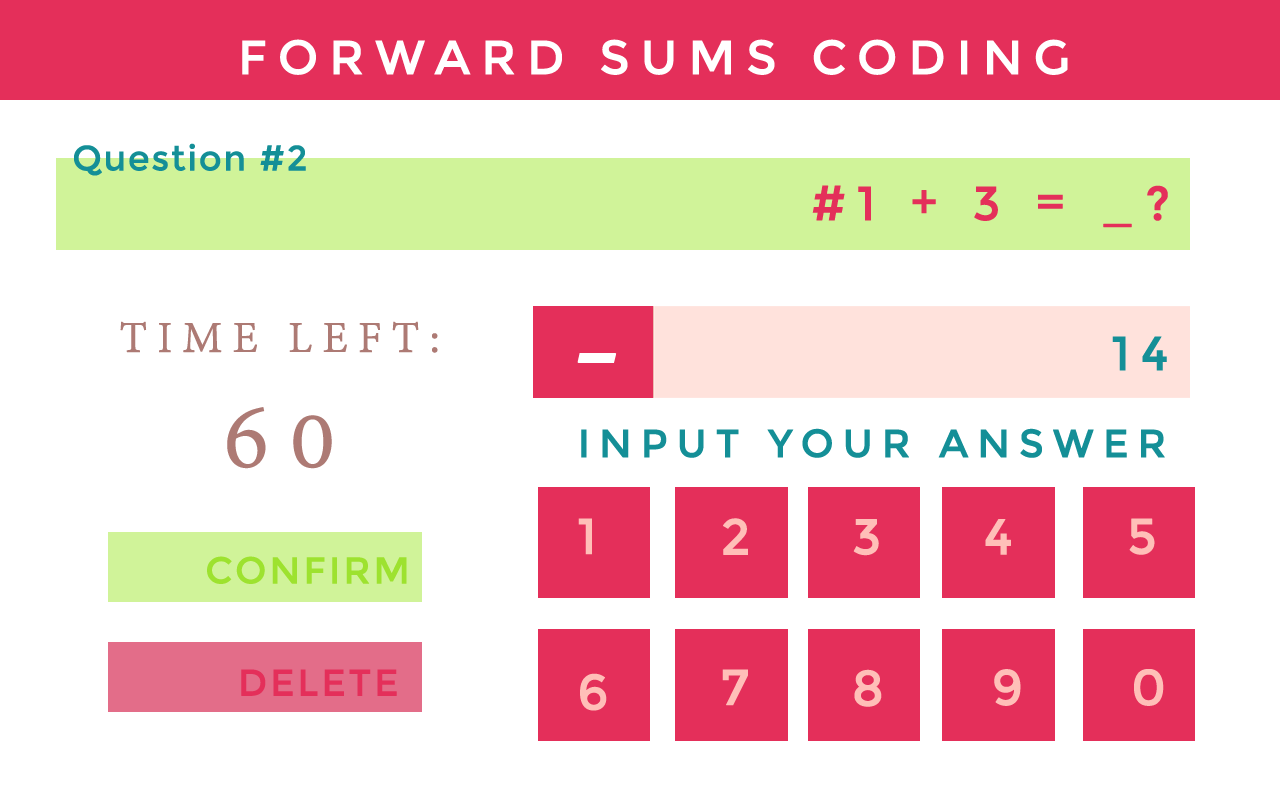
<style>
.page{position:relative;width:1280px;height:800px;background:#ffffff}
.page>*{position:absolute;margin:0}
.t1{font:48px "Montserrat-Regular";letter-spacing:0.2em;color:#ffffff;text-transform:uppercase;font-weight:bold}
.t2{font:35px "Montserrat-Regular";letter-spacing:0.025em;color:#148f97;font-weight:bold}
.t3{font:48px "Montserrat-Regular";letter-spacing:0.2em;color:#e42f5a;font-weight:bold}
.t4{font:48px/114.9px "AdobeDevanagari-Regular";letter-spacing:0.2em;color:#ad7a74;text-transform:uppercase;font-weight:bold}
.t5{font:100px/114.9px "AdobeDevanagari-Regular";letter-spacing:0.2em;color:#ad7a74;text-transform:uppercase;font-weight:bold}
.t6{font:48px "Montserrat-Regular";letter-spacing:0.2em;color:#148f97;font-weight:bold}
.t7{font:163.9px "AdobeDevanagari-Regular";letter-spacing:0.2em;color:#ffffff;text-transform:uppercase;font-weight:bold}
.t8{font:39.3px "Montserrat-Regular";letter-spacing:0.2em;color:#148f97;text-transform:uppercase;font-weight:bold}
.t9{font:50.3px "Montserrat-Regular";letter-spacing:0.2em;color:#ffbfb8;text-transform:uppercase;font-weight:bold}
.t10{font:37.3px "Montserrat-Regular";letter-spacing:0.05em;color:#9de22f;text-transform:uppercase;font-weight:bold}
.t11{font:37.3px "Montserrat-Regular";letter-spacing:0.05em;color:#e42f5a;text-transform:uppercase;font-weight:bold}
</style>
<div class="page">
<p class="t1" style="left:242px;top:39px;width:826px;height:36px">Forward Sums Coding</p>
<p class="t2" style="left:74px;top:143px;width:232px;height:33px">Question #2</p>
<p class="t3" style="left:812px;top:185px;width:356px;height:43px">#1 + 3 = _?</p>
<p class="t4" style="left:120px;top:321px;width:318px;height:148px;text-align:center">Time Left: <br><span class="t5">60</span></p>
<p class="t6" style="left:1112px;top:336px;width:55px;height:35px">14</p>
<p class="t7" style="left:577px;top:353px;width:40px;height:10px">-</p>
<p class="t8" style="left:581px;top:428px;width:584px;height:30px">Input your Answer</p>
<p class="t9" style="left:578px;top:518px;width:14px;height:37px">1</p>
<p class="t9" style="left:723px;top:518px;width:25px;height:37px">2</p>
<p class="t9" style="left:853px;top:519px;width:26px;height:37px">3</p>
<p class="t9" style="left:985px;top:519px;width:26px;height:36px">4</p>
<p class="t9" style="left:1129px;top:518px;width:26px;height:37px">5</p>
<p class="t10" style="left:207px;top:556px;width:200px;height:28px">Confirm</p>
<p class="t11" style="left:241px;top:669px;width:156px;height:27px">Delete</p>
<p class="t9" style="left:580px;top:673px;width:27px;height:38px">6</p>
<p class="t9" style="left:722px;top:669px;width:26px;height:37px">7</p>
<p class="t9" style="left:854px;top:669px;width:28px;height:38px">8</p>
<p class="t9" style="left:994px;top:669px;width:27px;height:37px">9</p>
<p class="t9" style="left:1134px;top:669px;width:30px;height:37px">0</p>
</div>
